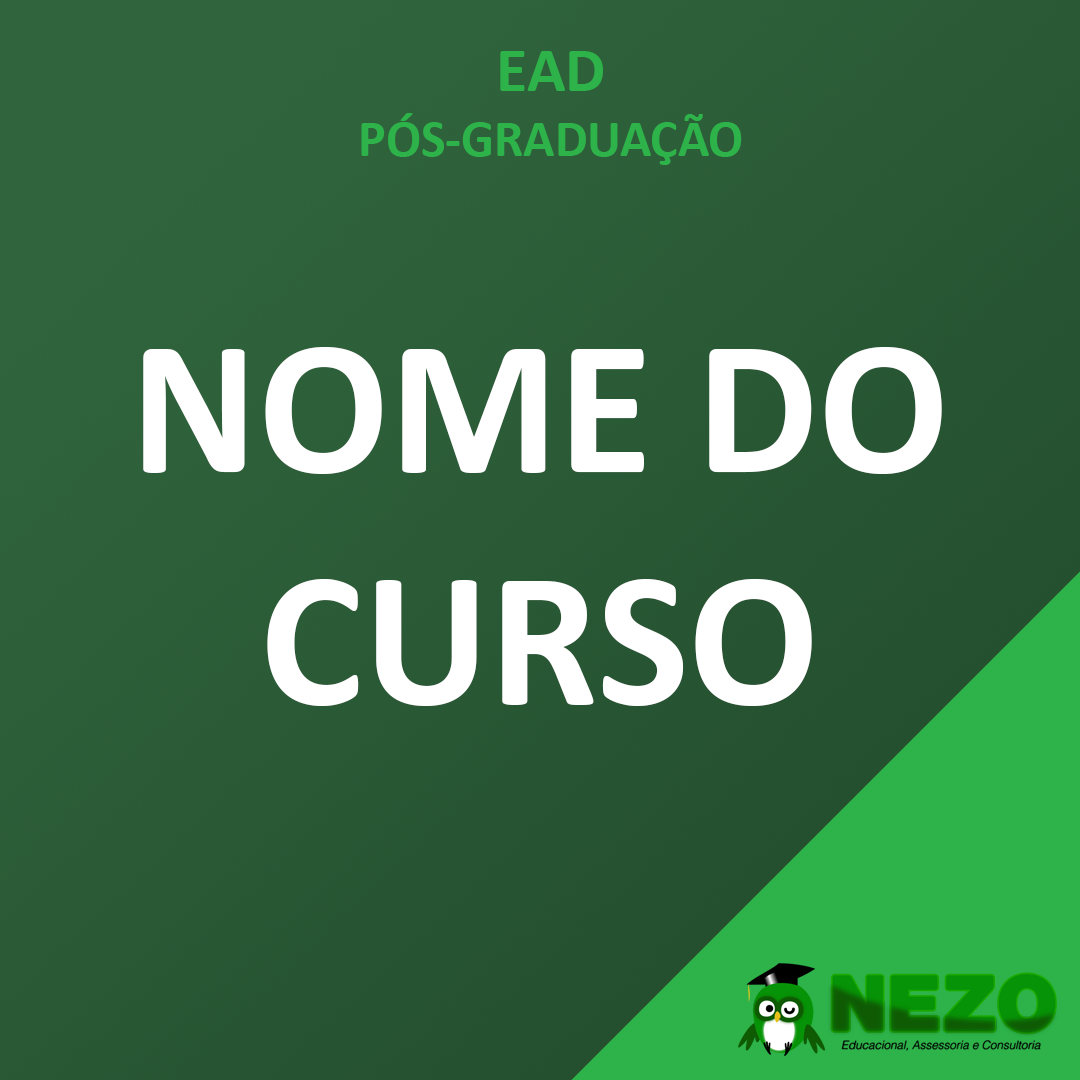
<style>
.page{position:relative;width:1080px;height:1080px}
.page>*{position:absolute;margin:0}
.t1{font:51.8px/65px "Calibri-Bold";color:#2db34a}
.t2{font:63.8px/50px "Calibri-Bold";color:#2db34a}
.t3{font:193.8px "Calibri-Bold";color:#ffffff}
</style>
<div class="page">
<p class="t1" style="left:361px;top:51px;width:381px;height:114px;text-align:center"><span class="t2">EAD<br></span>PÓS-GRADUAÇÃO</p>
<p class="t3" style="left:143px;top:347px;width:799px;height:359px;text-align:center">NOME DO CURSO</p>
</div>
